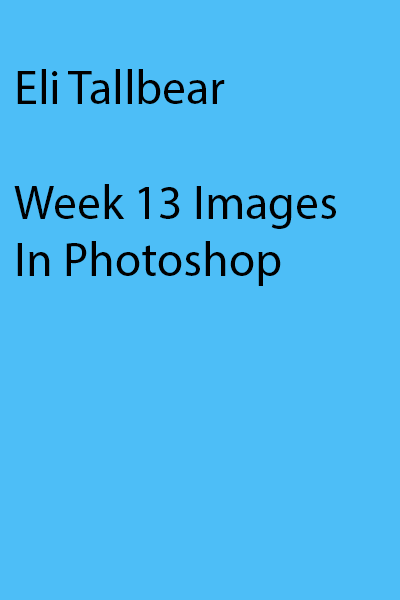
<style>
.page{position:relative;width:400px;height:600px;background:#4dbef7}
.page>*{position:absolute;margin:0}
.t1{font:48px "MyriadPro-Regular";color:#000000}
</style>
<div class="page">
<p class="t1" style="left:14px;top:69px;width:322px;height:217px">Eli Tallbear<br><br>Week 13 Images In Photoshop</p>
</div>
